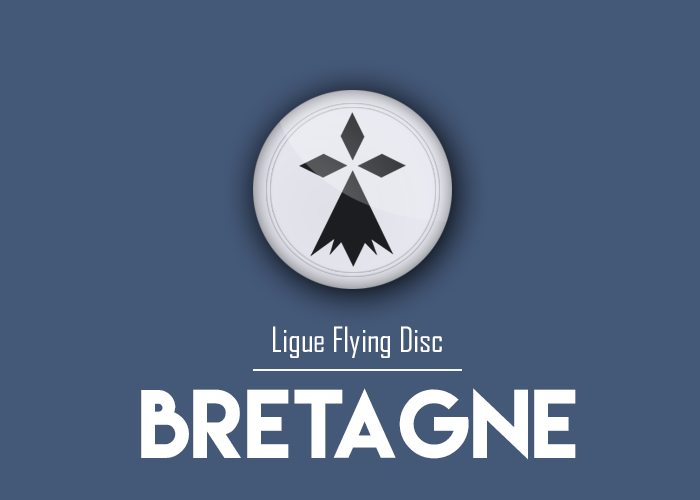
<style>
.page{position:relative;width:700px;height:500px;background:#445878}
.page>*{position:absolute;margin:0}
.t1{font:33.3px "AgencyFB-Reg";color:#ffffff}
.t2{font:86.7px "LemonMilk";color:#ffffff}
</style>
<div class="page">
<p class="t1" style="left:273px;top:326px;width:169px;height:32px">Ligue Flying Disc</p>
<p class="t2" style="left:141px;top:388px;width:435px;height:72px">Bretagne</p>
</div>
